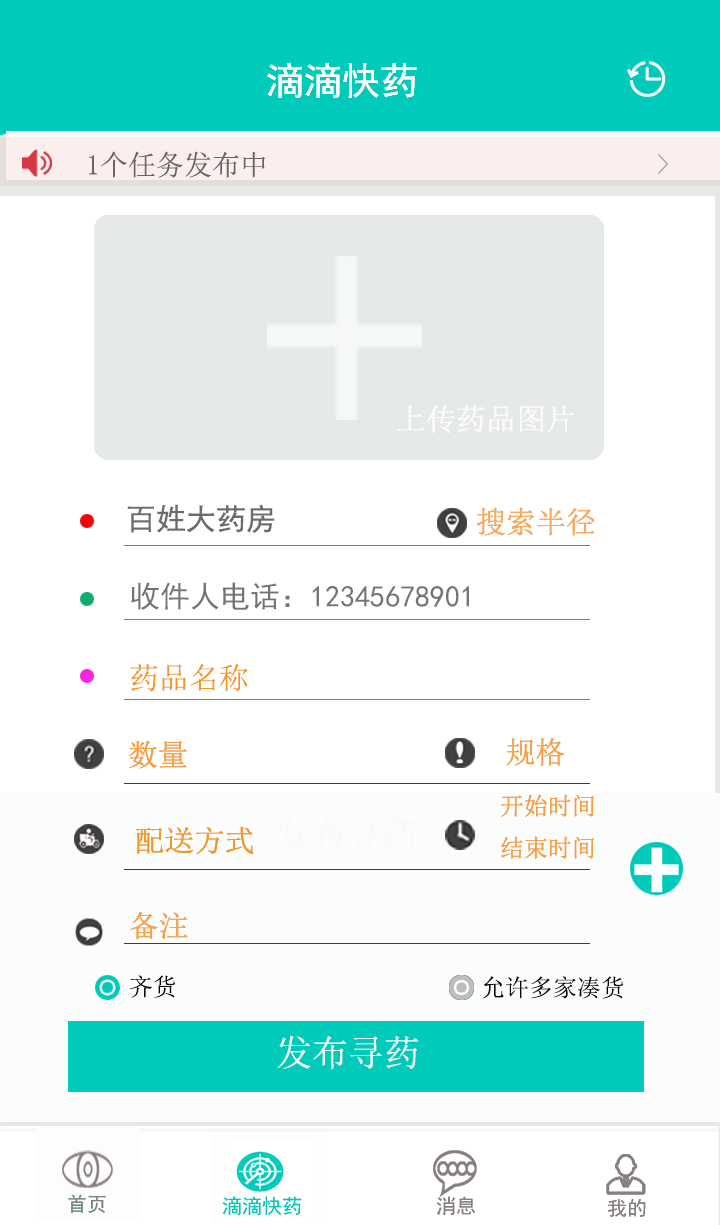
<style>
.page{position:relative;width:720px;height:1225px;background:#ffffff}
.page>*{position:absolute;margin:0}
.t1{font:28px "SimSun";color:#6a6564}
.t2{font:30px "SimSun";color:#fdfbf9}
.t3{font:30px "SimHei";color:#6c6c6c}
.t4{font:30px "SimSun";color:#f5a959}
.t5{font:30px "SimHei";color:#747474}
.t6{font:30px "SimSun";color:#f39725}
.t7{font:30px "SimSun";color:#f4a34a}
.t8{font:30px "SimSun";color:#f49f40}
.t9{font:24px "SimSun";color:#f49f40}
.t10{font:24px "SimSun";color:#080808}
.t11{font:36px "SimSun";color:#f8faf9}
</style>
<div class="page">
<p class="t1" style="left:89px;top:151px;width:176px;height:27px">1个任务发布中</p>
<p class="t2" style="left:397px;top:405px;width:177px;height:28px">上传药品图片</p>
<p class="t2" style="left:397px;top:405px;width:177px;height:28px">上传药品图片</p>
<p class="t3" style="left:127px;top:504px;width:148px;height:29px">百姓大药房</p>
<p class="t4" style="left:477px;top:507px;width:118px;height:29px">搜索半径</p>
<p class="t4" style="left:477px;top:507px;width:118px;height:29px">搜索半径</p>
<p class="t5" style="left:131px;top:582px;width:338px;height:28px">收件人电话：12345678901</p>
<p class="t6" style="left:130px;top:663px;width:118px;height:29px">药品名称</p>
<p class="t7" style="left:506px;top:737px;width:59px;height:29px">规格</p>
<p class="t7" style="left:506px;top:737px;width:59px;height:29px">规格</p>
<p class="t8" style="left:129px;top:740px;width:58px;height:29px">数量</p>
<p class="t8" style="left:129px;top:740px;width:58px;height:29px">数量</p>
<p class="t9" style="left:501px;top:794px;width:93px;height:65px">开始时间<br>结束时间</p>
<p class="t9" style="left:501px;top:794px;width:93px;height:65px">开始时间<br>结束时间</p>
<p class="t6" style="left:135px;top:826px;width:119px;height:28px">配送方式</p>
<p class="t6" style="left:135px;top:826px;width:119px;height:28px">配送方式</p>
<p class="t7" style="left:130px;top:911px;width:58px;height:29px">备注</p>
<p class="t7" style="left:130px;top:911px;width:58px;height:29px">备注</p>
<p class="t10" style="left:129px;top:975px;width:47px;height:23px">齐货</p>
<p class="t10" style="left:482px;top:976px;width:142px;height:23px">允许多家凑货</p>
<p class="t11" style="left:277px;top:1035px;width:142px;height:35px">发布寻药</p>
</div>
